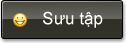
<style>
.page{position:relative;width:126px;height:43px}
.page>*{position:absolute;margin:0}
.t1{font:17px "ArialMT";color:#ffffff}
</style>
<div class="page">
<p class="t1" style="left:43px;top:11px;width:60px;height:17px">Sưu tập</p>
</div>
